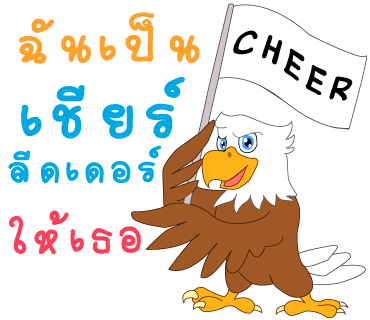
<style>
.page{position:relative;width:370px;height:320px;background:#ffffff}
.page>*{position:absolute;margin:0}
.t1{font:76px "2005_iannnnnMTV";letter-spacing:0.075em;color:#ffa12d;scale:1.06 1}
.t2{font:67px "2005_iannnnnMTV";letter-spacing:0.075em;color:#000000;scale:1.06 1}
.t3{font:96px "2005_iannnnnMTV";letter-spacing:0.075em;color:#00a8e1;scale:1.06 1}
.t4{font:57px "2005_iannnnnMTV";letter-spacing:0.075em;color:#00a8e1;scale:1.06 1}
.t5{font:68.7px "2005_iannnnnMTV";letter-spacing:0.075em;color:#fa405a}
</style>
<div class="page">
<p class="t1" style="left:19px;top:12px;width:181px;height:52px">ฉันเป็น</p>
<p class="t2" style="left:233px;top:30px;width:120px;height:71px;rotate:18deg">CHEER</p>
<p class="t3" style="left:21px;top:76px;width:164px;height:63px">เชียร์</p>
<p class="t4" style="left:8px;top:145px;width:154px;height:39px">ลีดเดอร์</p>
<p class="t5" style="left:8px;top:210px;width:133px;height:45px;rotate:-2deg">ให้เธอ</p>
</div>
